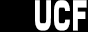
<style>
.page{position:relative;width:88px;height:32px;background:#000000}
.page>*{position:absolute;margin:0}
.t1{font:42.8px "MaximusCondensed-Bold";color:#ffffff}
</style>
<div class="page">
<p class="t1" style="left:35px;top:0px;width:52px;height:31px">UCF</p>
</div>
